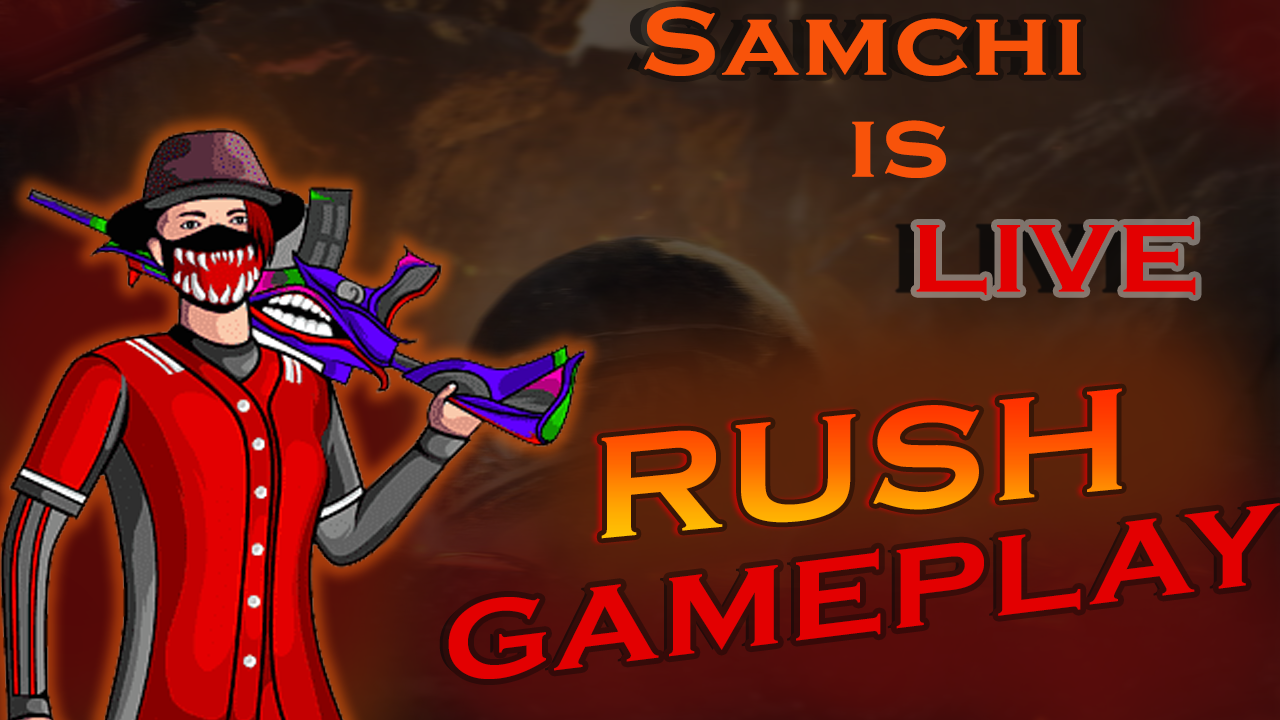
<style>
.page{position:relative;width:1280px;height:720px}
.page>*{position:absolute;margin:0}
.t1{font:100px "CopperplateGothic-Bold";letter-spacing:0.025em;color:#f8530a;scale:1.1 1}
.t2{font:100px "CopperplateGothic-Bold";letter-spacing:0.025em;color:#e30001;scale:1.1 1}
.t3{font:150px "CopperplateGothic-Bold";letter-spacing:0.025em;scale:1.1 1}
.t4{font:116.7px "CopperplateGothic-Bold";letter-spacing:0.025em;color:#e30001;scale:1.11 1}
</style>
<div class="page">
<p class="t1" style="left:644px;top:6px;width:437px;height:70px">Samchi</p>
<p class="t1" style="left:852px;top:120px;width:94px;height:58px">is</p>
<p class="t2" style="left:916px;top:221px;width:280px;height:74px">LIVE</p>
<p class="t3" style="left:601px;top:388px;width:521px;height:151px;rotate:-5deg">RUSH</p>
<p class="t4" style="left:448px;top:503px;width:832px;height:176px;rotate:-7deg">GAMEPLAY</p>
</div>
